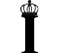
<style>
.page{position:relative;width:59px;height:53px;background:#ffffff}
.page>*{position:absolute;margin:0}
.t1{font:56.2px "CopperplateGothic-Light";letter-spacing:-0.008em;color:#000000;scale:2.08 1}
</style>
<div class="page">
<p class="t1" style="left:21px;top:16px;width:17px;height:37px">I</p>
</div>
